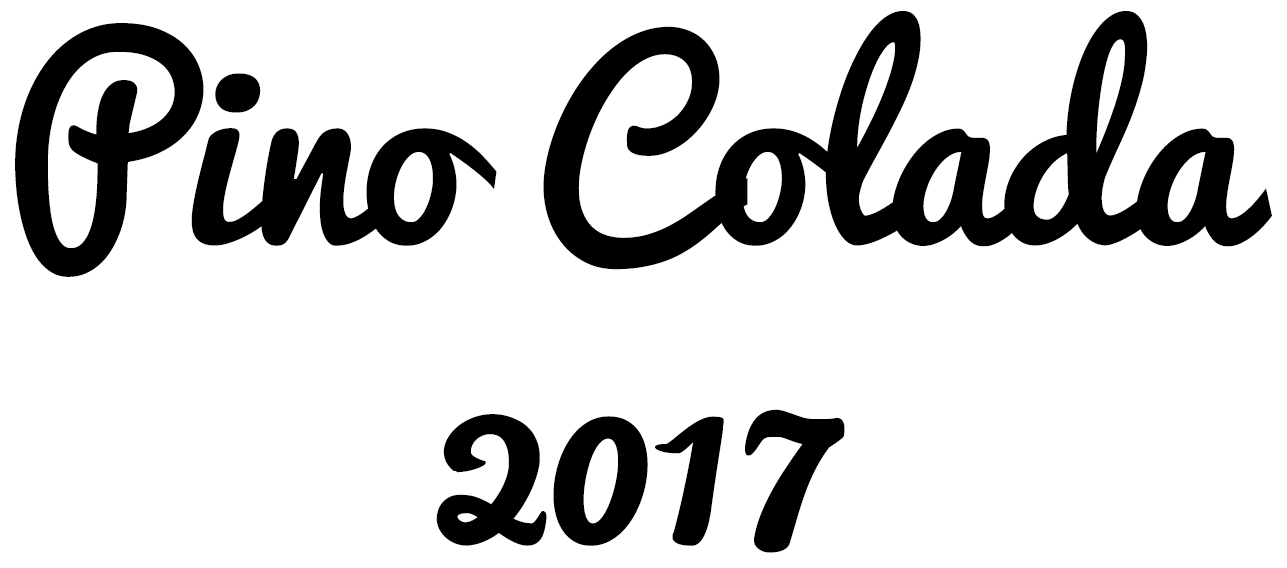
<style>
.page{position:relative;width:1287px;height:568px;background:#ffffff}
.page>*{position:absolute;margin:0}
.t1{font:250px "Pacifico-Regular";color:#000000}
</style>
<div class="page">
<p class="t1" style="left:15px;top:11px;width:1257px;height:542px;text-align:center">Pino Colada<br>2017</p>
</div>
